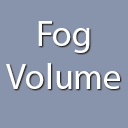
<style>
.page{position:relative;width:128px;height:128px;background:#8894ac}
.page>*{position:absolute;margin:0}
.t1{font:36px "MyriadPro-Regular";color:#ffffff}
</style>
<div class="page">
<p class="t1" style="left:6px;top:21px;width:114px;height:68px;text-align:center">Fog<br>Volume</p>
</div>
